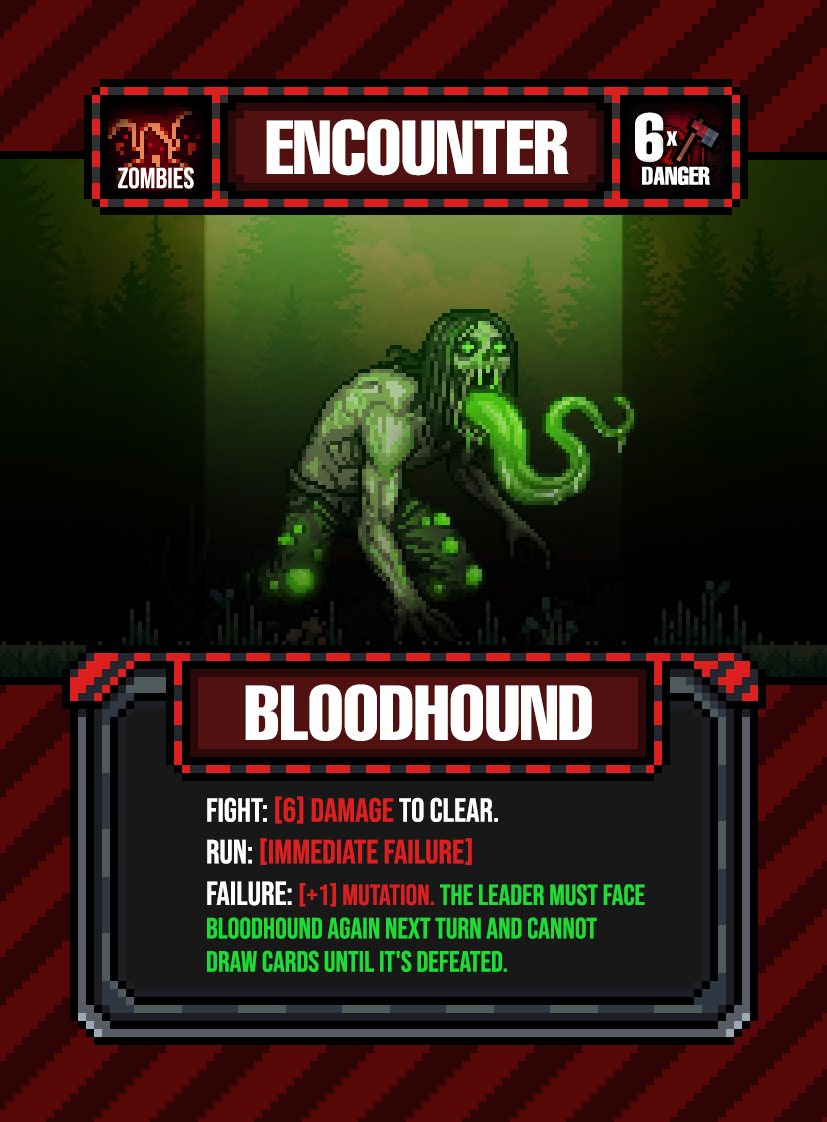
<style>
.page{position:relative;width:827px;height:1122px}
.page>*{position:absolute;margin:0}
.t1{font:75px "HelveticaLTPro-Compressed";color:#ffffff}
.t2{font:76.2px "HelveticaLTPro-Compressed";color:#ffffff}
.t3{font:29.2px/33.3px "BebasNeue-Regular";color:#1fdb35}
.t4{font:33.3px/41.7px "BebasNeue-Regular";color:#ffffff}
.t5{font:33.3px/41.7px "BebasNeue-Regular";color:#db201f}
.t6{font:33.3px/33.3px "BebasNeue-Regular";color:#db201f}
.t7{font:29.2px/41.7px "BebasNeue-Regular";color:#db201f}
</style>
<div class="page">
<p class="t1" style="left:266px;top:119px;width:303px;height:57px">ENCOUNTER</p>
<p class="t2" style="left:245px;top:684px;width:347px;height:57px">BLOODHOUND</p>
<p class="t3" style="left:207px;top:796px;width:438px;height:176px"><span class="t4">FIGHT: </span><span class="t5">[6] Damage</span><span class="t4"> to clear.<br>RUN: </span><span class="t6">[IMMEDIATE FAILURE]<br></span><span class="t4">failure: </span><span class="t7">[+1] MUTATION. </span>The Leader must face Bloodhound again next turn and cannot draw cards until it's defeated.</p>
</div>
